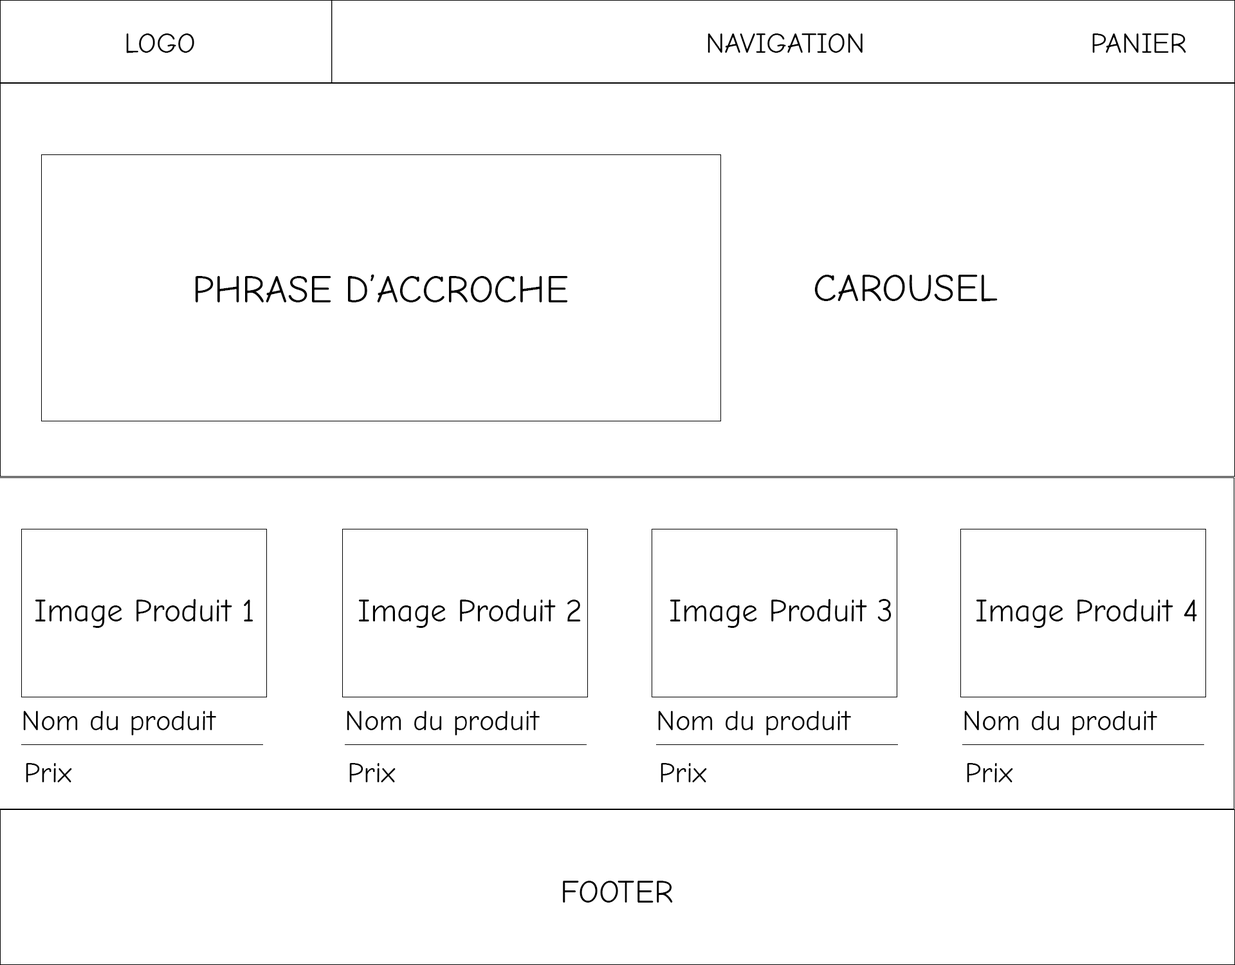
<style>
.page{position:relative;width:1235px;height:965px;background:#ffffff}
.page>*{position:absolute;margin:0}
.t1{font:29px "ComicNeue-Regular";color:#000000}
.t2{font:38.6px "ComicNeue-Regular";color:#000000}
.t3{font:32.2px "ComicNeue-Regular";color:#000000}
</style>
<div class="page">
<p class="t1" style="left:126px;top:33px;width:68px;height:20px">LOGO</p>
<p class="t1" style="left:708px;top:33px;width:155px;height:20px">NAVIGATION</p>
<p class="t1" style="left:1093px;top:33px;width:94px;height:20px">PANIER</p>
<p class="t2" style="left:196px;top:274px;width:372px;height:28px">PHRASE D’ACCROCHE</p>
<p class="t2" style="left:815px;top:275px;width:183px;height:27px">CAROUSEL</p>
<p class="t3" style="left:35px;top:599px;width:219px;height:29px">Image Produit 1</p>
<p class="t3" style="left:358px;top:599px;width:223px;height:29px">Image Produit 2</p>
<p class="t3" style="left:670px;top:599px;width:222px;height:29px">Image Produit 3</p>
<p class="t3" style="left:976px;top:599px;width:221px;height:29px">Image Produit 4</p>
<p class="t1" style="left:23px;top:711px;width:193px;height:24px">Nom du produit</p>
<p class="t1" style="left:347px;top:711px;width:193px;height:24px">Nom du produit</p>
<p class="t1" style="left:658px;top:711px;width:193px;height:24px">Nom du produit</p>
<p class="t1" style="left:965px;top:711px;width:193px;height:24px">Nom du produit</p>
<p class="t1" style="left:26px;top:763px;width:46px;height:19px">Prix</p>
<p class="t1" style="left:349px;top:763px;width:47px;height:19px">Prix</p>
<p class="t1" style="left:661px;top:763px;width:46px;height:19px">Prix</p>
<p class="t1" style="left:967px;top:763px;width:46px;height:19px">Prix</p>
<p class="t3" style="left:563px;top:881px;width:110px;height:22px">FOOTER</p>
</div>
